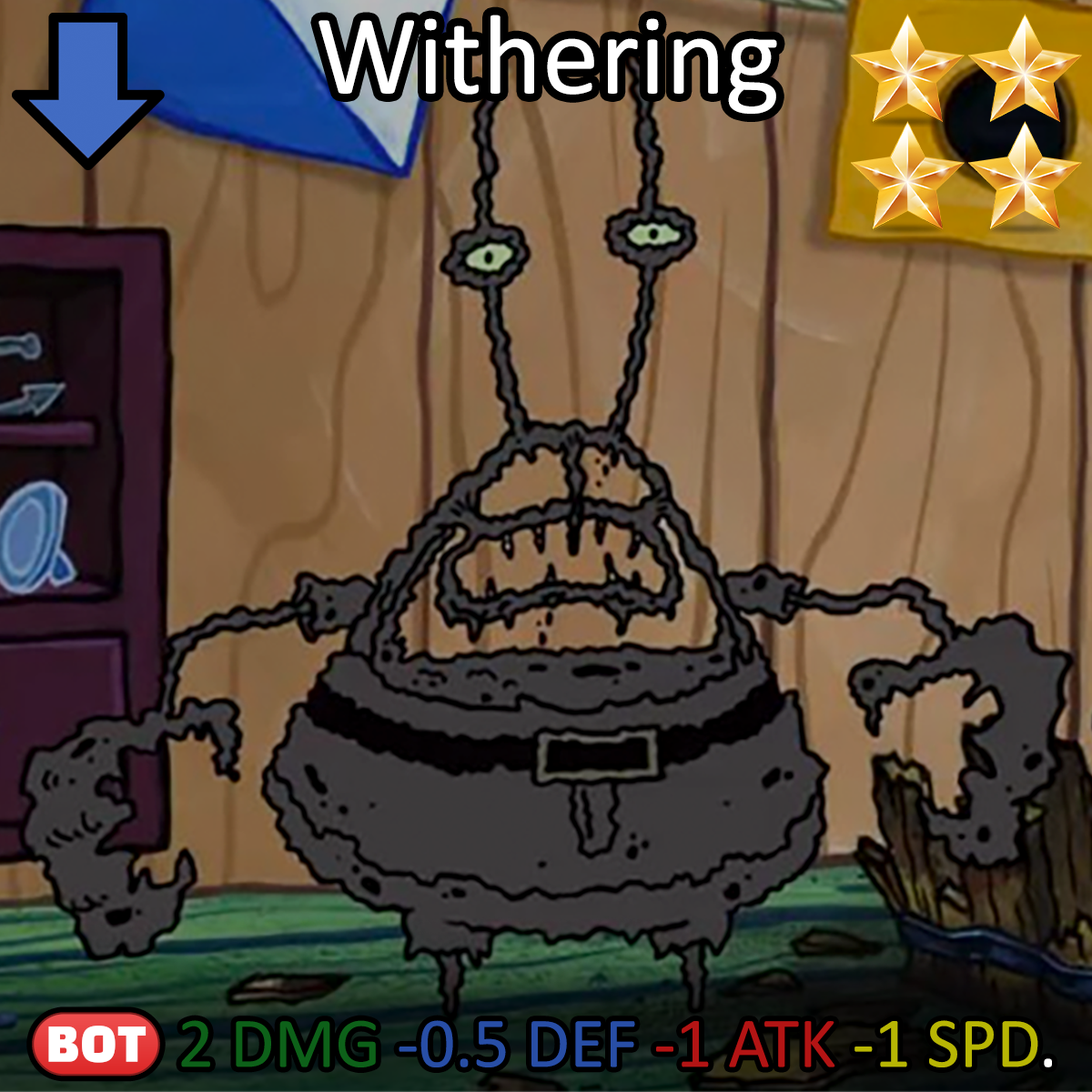
<style>
.page{position:relative;width:1092px;height:1092px}
.page>*{position:absolute;margin:0}
.t1{font:196.6px "Calibri";color:#ffffff}
.t2{font:122.8px "Calibri";color:#284ea6}
.t3{font:111.3px "stoogedings-Regular";color:#ffffff}
.t4{font:122.8px "Calibri";color:#0d6119}
.t5{font:122.8px "Calibri";color:#b31414}
.t6{font:122.8px "Calibri";color:#b8b604}
.t7{font:122.8px "Calibri";color:#ffffff}
</style>
<div class="page">
<p class="t1" style="left:318px;top:15px;width:459px;height:99px">Withering</p>
<p class="t2" style="left:32px;top:1012px;width:1020px;height:65px"><span class="t3">(BOT) </span><span class="t4">2 DMG </span>-0.5 DEF <span class="t5">-1 ATK </span><span class="t6">-1 SPD</span><span class="t7">.</span></p>
</div>
